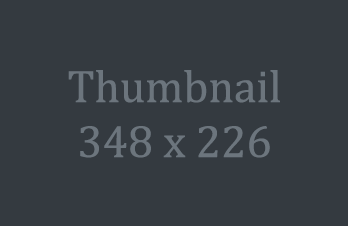
<style>
.page{position:relative;width:348px;height:226px;background:#343a40}
.page>*{position:absolute;margin:0}
.t1{font:45.8px "Cambria";color:#6c757d}
</style>
<div class="page">
<p class="t1" style="left:68px;top:70px;width:212px;height:88px;text-align:center">Thumbnail<br>348 x 226</p>
</div>
